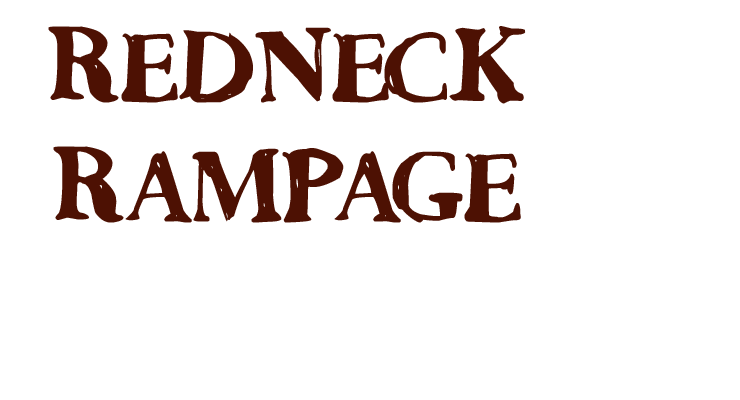
<style>
.page{position:relative;width:740px;height:400px;background:#ffffff}
.page>*{position:absolute;margin:0}
.t1{font:100px "CountryGold";color:#4d1103}
</style>
<div class="page">
<p class="t1" style="left:48px;top:26px;width:478px;height:197px;text-align:center">REDNECK<br>RAMPAGE</p>
</div>
